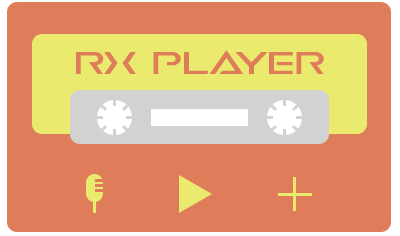
<style>
.page{position:relative;width:400px;height:236px;background:#df7c59}
.page>*{position:absolute;margin:0}
.t1{font:35px "EarthOrbiterBold";letter-spacing:-0.05em;color:#df7c59;scale:1.41 1}
</style>
<div class="page">
<p class="t1" style="left:76px;top:50px;width:248px;height:24px">RX Player</p>
</div>
